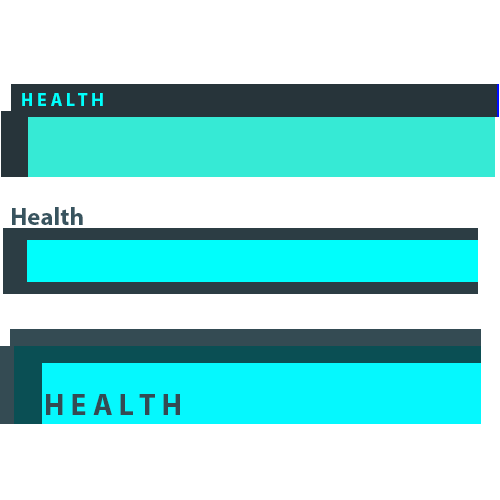
<style>
.page{position:relative;width:500px;height:500px;background:#ffffff}
.page>*{position:absolute;margin:0}
.t1{font:18px "MyriadPro-Bold";color:#00fffc}
.t2{font:25px "MyriadPro-Bold";color:#38545f}
.t3{font:30px "MyriadPro-Bold";color:#344b53}
</style>
<div class="page">
<p class="t1" style="left:22px;top:93px;width:81px;height:13px">H E A L T H</p>
<p class="t2" style="left:12px;top:207px;width:71px;height:18px">Health</p>
<p class="t3" style="left:46px;top:394px;width:134px;height:21px">H E A L T H</p>
</div>
